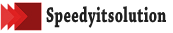
<style>
.page{position:relative;width:173px;height:33px;background:#ffffff}
.page>*{position:absolute;margin:0}
.t1{font:22.4px "ChaparralPro-Bold";letter-spacing:0.02em;color:#1f1f1f;scale:0.67 1}
</style>
<div class="page">
<p class="t1" style="left:46px;top:6px;width:120px;height:22px">Speedyitsolution</p>
</div>
